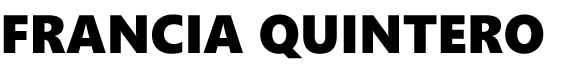
<style>
.page{position:relative;width:576px;height:72px;background:#ffffff}
.page>*{position:absolute;margin:0}
.t1{font:54px "SegoeUIBlack";color:#000000}
</style>
<div class="page">
<p class="t1" style="left:3px;top:14px;width:541px;height:45px">FRANCIA QUINTERO</p>
</div>
